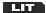
<style>
.page{position:relative;width:46px;height:13px;background:#ffffff}
.page>*{position:absolute;margin:0}
.t1{font:10.5px "BulletproofBB";color:#ffffff;scale:1.46 1}
</style>
<div class="page">
<p class="t1" style="left:11px;top:4px;width:24px;height:7px">lit</p>
</div>
